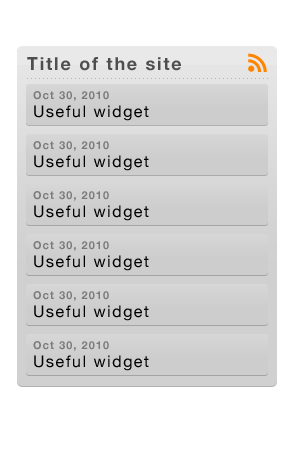
<style>
.page{position:relative;width:297px;height:452px;background:#ffffff}
.page>*{position:absolute;margin:0}
.t1{font:18px "HelveticaNeue-Bold";letter-spacing:0.095em;color:#4e4e4e}
.t2{font:11px "HelveticaNeue-Bold";letter-spacing:0.095em;color:#7c7b7b}
.t3{font:16px "HelveticaNeue";letter-spacing:0.095em;color:#000000}
</style>
<div class="page">
<p class="t1" style="left:27px;top:57px;width:154px;height:14px">Title of the site</p>
<p class="t2" style="left:33px;top:91px;width:76px;height:10px">Oct 30, 2010</p>
<p class="t3" style="left:34px;top:105px;width:115px;height:16px">Useful widget</p>
<p class="t2" style="left:33px;top:141px;width:76px;height:10px">Oct 30, 2010</p>
<p class="t3" style="left:34px;top:155px;width:115px;height:16px">Useful widget</p>
<p class="t2" style="left:33px;top:191px;width:76px;height:10px">Oct 30, 2010</p>
<p class="t3" style="left:34px;top:205px;width:115px;height:16px">Useful widget</p>
<p class="t2" style="left:33px;top:241px;width:76px;height:10px">Oct 30, 2010</p>
<p class="t3" style="left:34px;top:255px;width:115px;height:16px">Useful widget</p>
<p class="t2" style="left:33px;top:291px;width:76px;height:10px">Oct 30, 2010</p>
<p class="t3" style="left:34px;top:305px;width:115px;height:16px">Useful widget</p>
<p class="t2" style="left:33px;top:341px;width:76px;height:10px">Oct 30, 2010</p>
<p class="t3" style="left:34px;top:355px;width:115px;height:16px">Useful widget</p>
</div>
